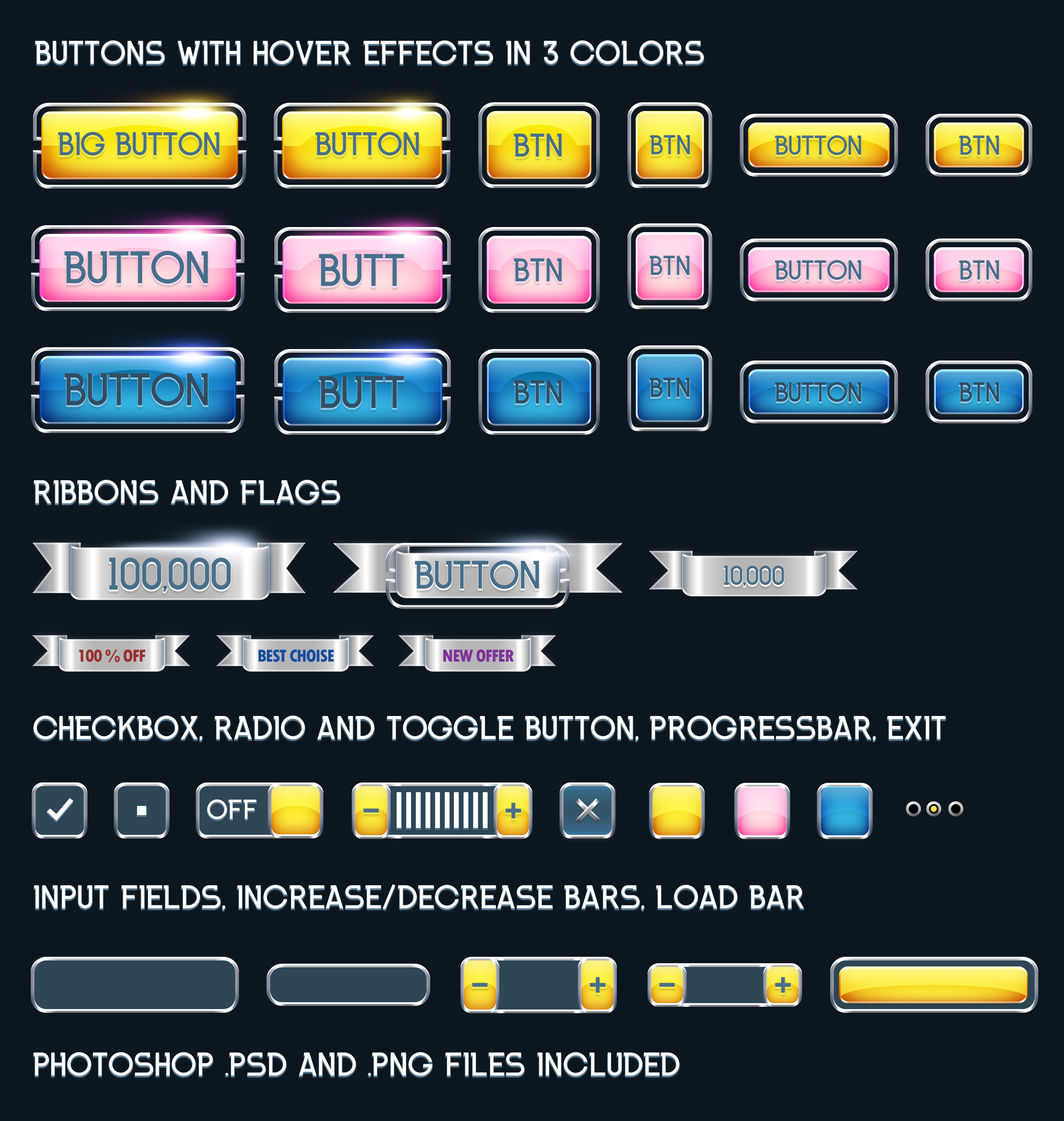
<style>
.page{position:relative;width:1064px;height:1121px;background:#0c161f}
.page>*{position:absolute;margin:0}
.t1{font:33px "INKFERNO";color:#ffffff;text-transform:uppercase}
.t2{font:33px "INKFERNO";letter-spacing:-0.025em;color:#476f8b;text-transform:uppercase}
.t3{font:27.5px "INKFERNO";letter-spacing:-0.025em;color:#476f8b;text-transform:uppercase}
.t4{font:45.9px "INKFERNO";letter-spacing:-0.025em;color:#476f8b;text-transform:uppercase}
.t5{font:45.9px "INKFERNO";letter-spacing:-0.025em;color:#314e62;text-transform:uppercase}
.t6{font:27.5px "INKFERNO";letter-spacing:-0.025em;color:#314e62;text-transform:uppercase}
.t7{font:33px "INKFERNO";letter-spacing:-0.025em;color:#314e62;text-transform:uppercase}
.t8{font:45.9px "INKFERNO";color:#476f8b;text-transform:uppercase}
.t9{font:39.6px "INKFERNO";letter-spacing:-0.025em;color:#476f8b;text-transform:uppercase}
.t10{font:27.5px "INKFERNO";color:#476f8b;text-transform:uppercase}
.t11{font:18.3px "TwCenMT-CondensedExtraBold";letter-spacing:-0.05em;color:#9b3030;text-transform:uppercase}
.t12{font:18.3px "TwCenMT-CondensedExtraBold";letter-spacing:-0.05em;color:#154e9f;text-transform:uppercase}
.t13{font:18.3px "TwCenMT-CondensedExtraBold";letter-spacing:-0.05em;color:#7e309b;text-transform:uppercase}
.t14{font:27.5px "INKFERNO";color:#ffffff;text-transform:uppercase}
</style>
<div class="page">
<p class="t1" style="left:35px;top:40px;width:669px;height:24px">Buttons with hover effects in 3 colors</p>
<p class="t2" style="left:58px;top:132px;width:162px;height:23px">big button</p>
<p class="t2" style="left:316px;top:132px;width:103px;height:23px">button</p>
<p class="t2" style="left:514px;top:133px;width:48px;height:24px">Btn</p>
<p class="t3" style="left:650px;top:135px;width:40px;height:20px">btn</p>
<p class="t3" style="left:775px;top:135px;width:86px;height:20px">button</p>
<p class="t3" style="left:959px;top:135px;width:40px;height:20px">btn</p>
<p class="t4" style="left:64px;top:250px;width:144px;height:34px">button</p>
<p class="t4" style="left:319px;top:254px;width:85px;height:32px">butt</p>
<p class="t3" style="left:649px;top:255px;width:41px;height:20px">btn</p>
<p class="t2" style="left:514px;top:258px;width:48px;height:24px">Btn</p>
<p class="t3" style="left:775px;top:260px;width:86px;height:20px">button</p>
<p class="t3" style="left:959px;top:260px;width:40px;height:20px">btn</p>
<p class="t5" style="left:64px;top:372px;width:144px;height:34px">button</p>
<p class="t5" style="left:319px;top:376px;width:85px;height:32px">butt</p>
<p class="t6" style="left:649px;top:377px;width:41px;height:20px">btn</p>
<p class="t7" style="left:514px;top:380px;width:48px;height:24px">Btn</p>
<p class="t6" style="left:775px;top:382px;width:86px;height:20px">button</p>
<p class="t6" style="left:959px;top:382px;width:40px;height:20px">btn</p>
<p class="t1" style="left:34px;top:480px;width:306px;height:24px">Ribbons and flags</p>
<p class="t8" style="left:109px;top:557px;width:122px;height:35px">100,000</p>
<p class="t9" style="left:415px;top:560px;width:124px;height:29px">Button</p>
<p class="t10" style="left:724px;top:565px;width:60px;height:22px">10,000</p>
<p class="t11" style="left:79px;top:649px;width:66px;height:13px">100 % off</p>
<p class="t12" style="left:258px;top:649px;width:76px;height:13px">best choise</p>
<p class="t13" style="left:443px;top:649px;width:71px;height:13px">new offer</p>
<p class="t1" style="left:33px;top:715px;width:913px;height:26px">Checkbox, Radio and Toggle Button, Progressbar, exit</p>
<p class="t14" style="left:207px;top:799px;width:49px;height:20px">off</p>
<p class="t1" style="left:34px;top:884px;width:770px;height:26px">input fields, increase/decrease bars, Load Bar</p>
<p class="t1" style="left:33px;top:1052px;width:647px;height:24px">Photoshop .psd and .png files included</p>
</div>
